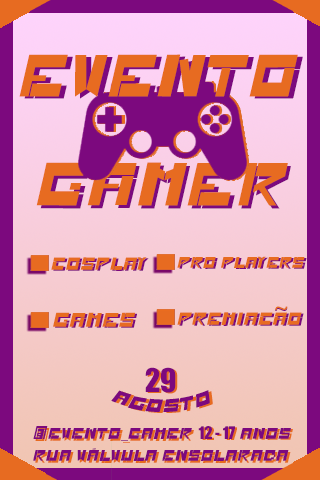
<style>
.page{position:relative;width:320px;height:480px;background:#7c097e}
.page>*{position:absolute;margin:0}
.t1{font:53.7px "GAME_glm";color:#e76b21}
.t2{font:53.7px "GAME_glm"}
.t3{font:55px "GAME_glm";color:#e76b21}
.t4{font:55px "GAME_glm"}
.t5{font:16px "GAME_glm";color:#e76b21}
.t6{font:14px "GAME_glm";color:#e76b21}
.t7{font:14px "GAME_glm"}
.t8{font:16px "GAME_glm"}
.t9{font:18px "GAME_glm";color:#e76b21}
.t10{font:18px "GAME_glm"}
.t11{font:24px "MyriadPro-Regular"}
.t12{font:24px "MyriadPro-Regular";color:#e76b21}
.t13{font:30px "GaboDrive";color:#7c097e}
.t14{font:30px "GaboDrive"}
.t15{font:16px "GAME_glm";color:#7c097e}
.t16{font:14px "GAME_glm";color:#7c097e}
.t17{font:24px "GAME_glm";color:#7c097e}
.t18{font:14px "MyriadPro-Regular";color:#7c097e}
.t19{font:24px "GAME_glm"}
.t20{font:14px "MyriadPro-Regular"}
.t21{font:16px "GaboDrive";color:#7c097e}
.t22{font:16px "GaboDrive"}
</style>
<div class="page">
<p class="t1" style="left:19px;top:54px;width:279px;height:43px">EVENTO</p>
<p class="t2" style="left:24px;top:56px;width:279px;height:43px">EVENTO</p>
<p class="t3" style="left:36px;top:162px;width:252px;height:44px">GAMER</p>
<p class="t4" style="left:40px;top:165px;width:251px;height:44px">GAMER</p>
<p class="t5" style="left:51px;top:257px;width:96px;height:13px">COSPLAY</p>
<p class="t6" style="left:177px;top:256px;width:128px;height:12px">PRO PLAYERS</p>
<p class="t7" style="left:179px;top:257px;width:128px;height:12px">PRO PLAYERS</p>
<p class="t8" style="left:53px;top:258px;width:96px;height:13px">COSPLAY</p>
<p class="t9" style="left:53px;top:312px;width:82px;height:15px">GAMES</p>
<p class="t10" style="left:55px;top:313px;width:82px;height:15px">GAMES</p>
<p class="t5" style="left:177px;top:312px;width:125px;height:13px">PREMIACAO</p>
<p class="t8" style="left:179px;top:313px;width:125px;height:13px">PREMIACAO</p>
<p class="t11" style="left:275px;top:307px;width:13px;height:4px">~</p>
<p class="t12" style="left:275px;top:306px;width:13px;height:4px">~</p>
<p class="t13" style="left:145px;top:367px;width:31px;height:26px">29</p>
<p class="t14" style="left:147px;top:368px;width:31px;height:26px">29</p>
<p class="t15" style="left:111px;top:390px;width:99px;height:22px">AGOSTO</p>
<p class="t8" style="left:114px;top:391px;width:99px;height:22px">AGOSTO</p>
<p class="t16" style="left:33px;top:426px;width:159px;height:15px"><span class="t17">@</span>EVENTO<span class="t18">_</span>GAMER</p>
<p class="t7" style="left:35px;top:428px;width:159px;height:15px"><span class="t19">@</span>EVENTO<span class="t20">_</span>GAMER</p>
<p class="t21" style="left:198px;top:426px;width:93px;height:13px">12 - 17<span class="t16"> ANOS</span></p>
<p class="t22" style="left:200px;top:427px;width:93px;height:13px">12 - 17<span class="t7"> ANOS</span></p>
<p class="t16" style="left:33px;top:448px;width:256px;height:13px">RUA VÁLVULA ENSOLARADA</p>
<p class="t7" style="left:35px;top:450px;width:256px;height:13px">RUA VÁLVULA ENSOLARADA</p>
</div>
